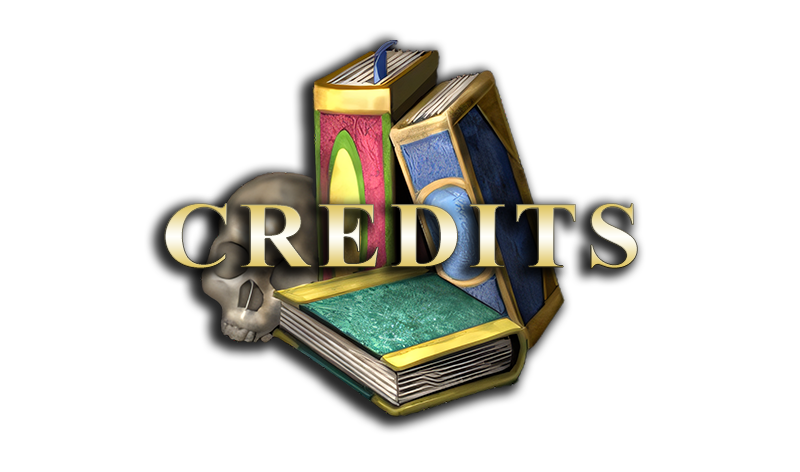
<style>
.page{position:relative;width:800px;height:472px;background:#ffffff}
.page>*{position:absolute;margin:0}
.t1{font:94px "TimesNewRomanPS-BoldMT";letter-spacing:0.07em;scale:1.05 1}
</style>
<div class="page">
<p class="t1" style="left:164px;top:203px;width:474px;height:66px">CREDITS</p>
</div>
